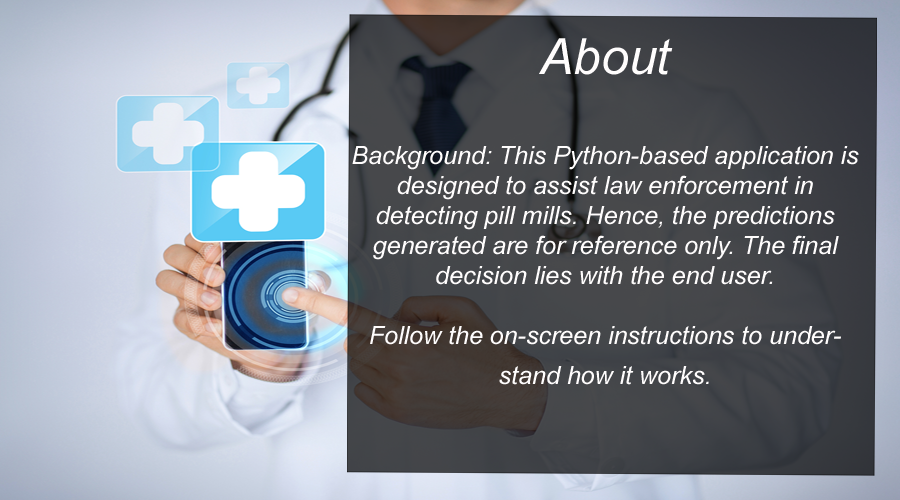
<style>
.page{position:relative;width:900px;height:500px}
.page>*{position:absolute;margin:0}
.t1{font:25px "Arial-ItalicMT";color:#fffdfd}
.t2{font:50px "Arial-ItalicMT";color:#fffdfd}
</style>
<div class="page">
<p class="t1" style="left:352px;top:38px;width:507px;height:347px;text-align:center"><span class="t2">About<br>                   <br></span>Background: This Python-based application is designed to assist law enforcement in <br>detecting pill mills. Hence, the predictions generated are for reference only. The final <br>decision lies with the end user. <br><br>Follow the on-screen instructions to understand how it works.</p>
</div>
